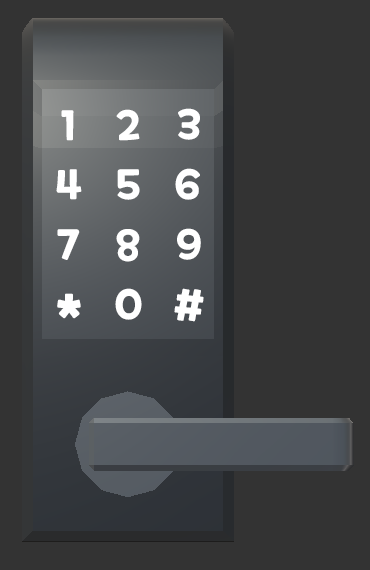
<style>
.page{position:relative;width:370px;height:570px;background:#333333}
.page>*{position:absolute;margin:0}
.t1{font:40px "ONEMobilePOPOTFRegular";letter-spacing:-0.1em;color:#ffffff}
.t2{font:53.3px "ONEMobilePOPOTFRegular";letter-spacing:-0.1em;color:#ffffff}
</style>
<div class="page">
<p class="t1" style="left:61px;top:110px;width:13px;height:31px">1</p>
<p class="t1" style="left:116px;top:109px;width:24px;height:32px">2</p>
<p class="t1" style="left:178px;top:108px;width:22px;height:32px">3</p>
<p class="t1" style="left:56px;top:169px;width:26px;height:31px">4</p>
<p class="t1" style="left:117px;top:169px;width:23px;height:31px">5</p>
<p class="t1" style="left:175px;top:168px;width:25px;height:32px">6</p>
<p class="t1" style="left:57px;top:229px;width:23px;height:31px">7</p>
<p class="t1" style="left:116px;top:229px;width:24px;height:33px">8</p>
<p class="t1" style="left:177px;top:228px;width:24px;height:32px">9</p>
<p class="t2" style="left:57px;top:293px;width:24px;height:26px">*</p>
<p class="t1" style="left:115px;top:288px;width:27px;height:32px">0</p>
<p class="t1" style="left:174px;top:288px;width:30px;height:34px">#</p>
</div>
